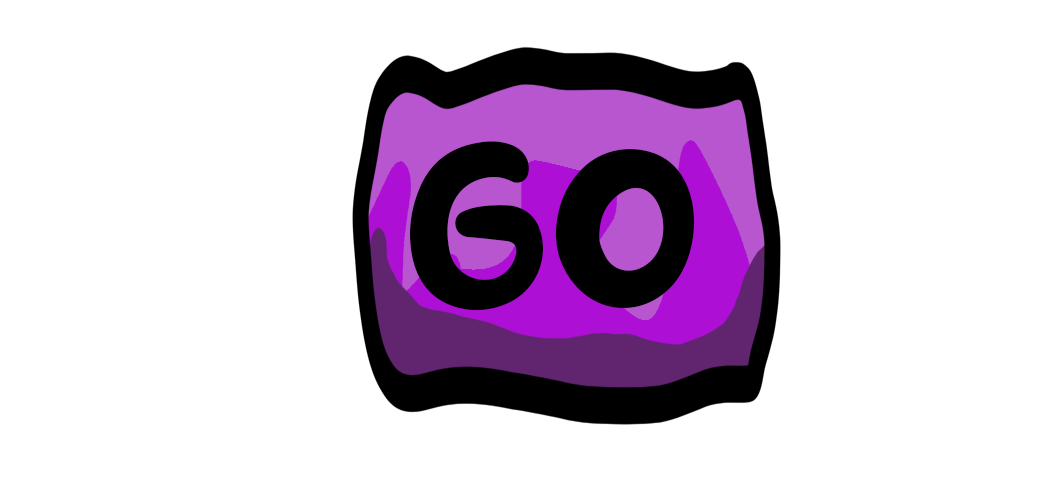
<style>
.page{position:relative;width:1056px;height:477px;background:#ffffff}
.page>*{position:absolute;margin:0}
.t1{font:200px "Pineapple-Days";color:#000000}
</style>
<div class="page">
<p class="t1" style="left:410px;top:141px;width:285px;height:170px">GO</p>
</div>
